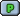
<style>
.page{position:relative;width:20px;height:16px}
.page>*{position:absolute;margin:0}
.t1{font:10px "Arial-Black";color:#4dcd40}
</style>
<div class="page">
<p class="t1" style="left:7px;top:4px;width:7px;height:8px">P</p>
</div>
